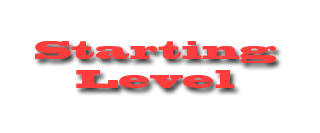
<style>
.page{position:relative;width:320px;height:133px;background:#ffffff}
.page>*{position:absolute;margin:0}
.t1{font:24px "BlackoakStd";color:#ff3d3d}
</style>
<div class="page">
<p class="t1" style="left:35px;top:41px;width:241px;height:47px;text-align:center">Starting<br>Level</p>
</div>
